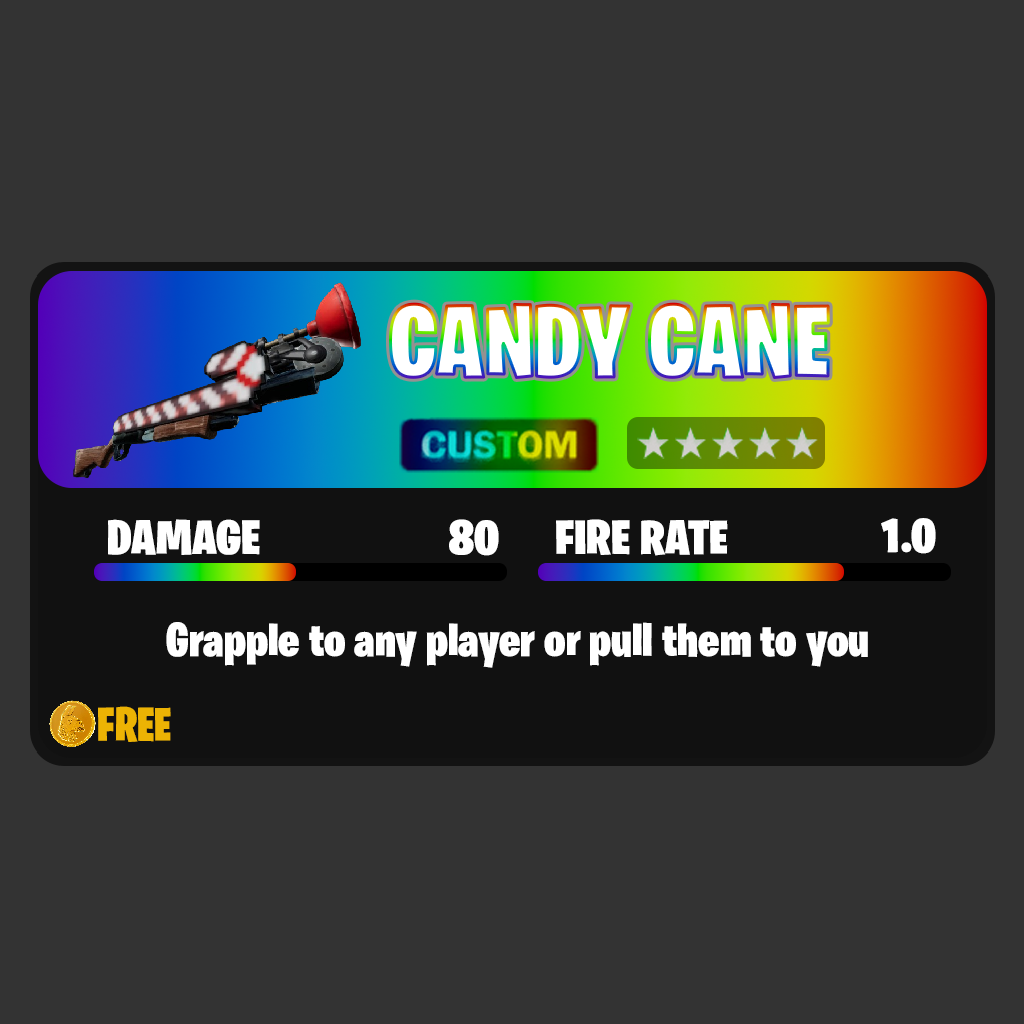
<style>
.page{position:relative;width:1024px;height:1024px;background:#333333}
.page>*{position:absolute;margin:0}
.t1{font:100.8px "BurbankBigCondensed-Black";color:#ffffff}
.t2{font:48.4px "BurbankBigCondensed-Black";color:#ffffff;scale:1.1 1}
.t3{font:48.3px "BurbankBigCondensed-Black";color:#ffffff;scale:1.1 1}
.t4{font:48px "BurbankBigCondensed-Black";color:#ffffff}
.t5{font:48px "BurbankBigCondensed-Black";color:#ecb304}
</style>
<div class="page">
<p class="t1" style="left:390px;top:303px;width:439px;height:75px">CANDY CANE</p>
<p class="t2" style="left:108px;top:519px;width:152px;height:36px">DAMAGE</p>
<p class="t2" style="left:449px;top:519px;width:50px;height:37px">80</p>
<p class="t3" style="left:556px;top:519px;width:172px;height:37px">FIRE RATE</p>
<p class="t3" style="left:881px;top:518px;width:55px;height:36px">1.0</p>
<p class="t4" style="left:166px;top:622px;width:702px;height:46px">Grapple to any player or pull them to you</p>
<p class="t5" style="left:98px;top:706px;width:73px;height:36px">FREE</p>
</div>
